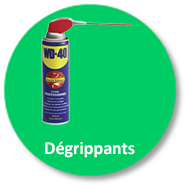
<style>
.page{position:relative;width:185px;height:185px;background:#00cc66}
.page>*{position:absolute;margin:0}
.t1{font:18px "Calibri-Bold";color:#ffffff}
</style>
<div class="page">
<p class="t1" style="left:45px;top:141px;width:90px;height:17px">Dégrippants</p>
</div>
